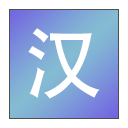
<style>
.page{position:relative;width:128px;height:128px;background:#ffffff}
.page>*{position:absolute;margin:0}
.t1{font:78px "AdobeHeitiStd-Regular";color:#ffffff}
</style>
<div class="page">
<p class="t1" style="left:28px;top:28px;width:72px;height:71px">汉</p>
</div>
